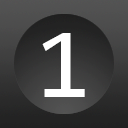
<style>
.page{position:relative;width:128px;height:128px}
.page>*{position:absolute;margin:0}
.t1{font:100px "Consolas";color:#ffffff}
</style>
<div class="page">
<p class="t1" style="left:42px;top:33px;width:43px;height:64px">1</p>
</div>
